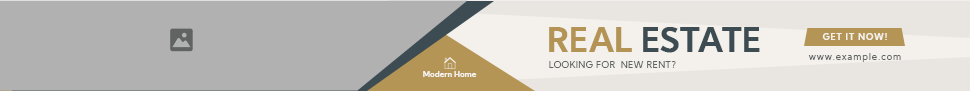
<style>
.page{position:relative;width:970px;height:91px;background:#b1b1b1}
.page>*{position:absolute;margin:0}
.t1{font:34px "KumbhSans-Bold";color:#3d4c52}
.t2{font:34px "KumbhSans-Bold";color:#b49555}
.t3{font:9px "KumbhSans-Bold";letter-spacing:0.097em;color:#f4f0ec}
.t4{font:9px "KumbhSans-Regular";letter-spacing:0.1em;color:#5f6565}
.t5{font:9px "KumbhSans-Regular";letter-spacing:0.04em;color:#5f6565}
.t6{font:8px "KumbhSans-Bold";color:#f4f0ec}
</style>
<div class="page">
<p class="t1" style="left:549px;top:27px;width:211px;height:26px"><span class="t2">REAL </span>ESTATE</p>
<p class="t3" style="left:822px;top:33px;width:65px;height:7px">GET IT NOW!</p>
<p class="t4" style="left:808px;top:53px;width:93px;height:9px">www.example.com</p>
<p class="t5" style="left:549px;top:61px;width:127px;height:7px">LOOKING FOR  NEW RENT?</p>
<p class="t6" style="left:423px;top:71px;width:54px;height:6px">Modern Home</p>
</div>
